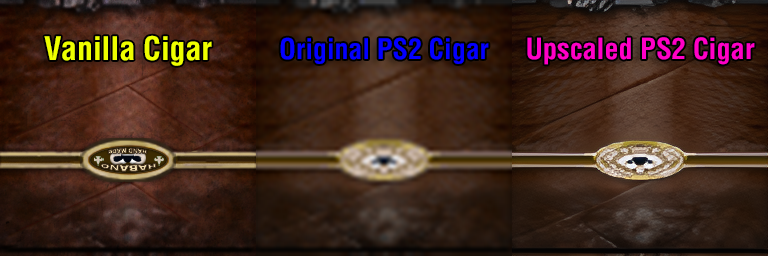
<style>
.page{position:relative;width:768px;height:256px}
.page>*{position:absolute;margin:0}
.t1{font:31.8px "Helvetica-Condensed-Bold";color:#eeff00}
.t2{font:27.8px "Helvetica-Condensed-Bold";color:#0400ff}
.t3{font:28.4px "Helvetica-Condensed-Bold";color:#ff00c6}
</style>
<div class="page">
<p class="t1" style="left:44px;top:35px;width:168px;height:31px">Vanilla Cigar</p>
<p class="t2" style="left:280px;top:37px;width:209px;height:27px">Original PS2 Cigar</p>
<p class="t3" style="left:527px;top:37px;width:228px;height:28px">Upscaled PS2 Cigar</p>
</div>
